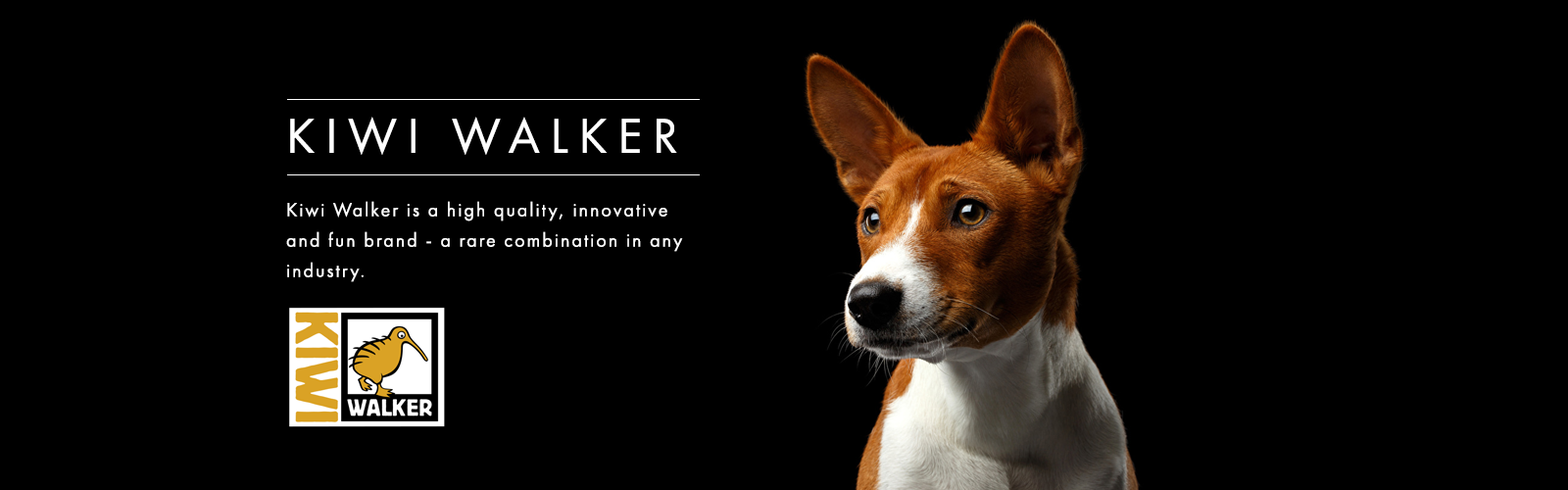
<style>
.page{position:relative;width:1568px;height:490px;background:#000000}
.page>*{position:absolute;margin:0}
.t1{font:51px "FuturaPT-Book";letter-spacing:0.2em;color:#ffffff}
.t2{font:19.6px/30.4px "FuturaPT-Book";letter-spacing:0.1em;color:#ffffff}
</style>
<div class="page">
<p class="t1" style="left:290px;top:117px;width:387px;height:38px">KIWI WALKER</p>
<p class="t2" style="left:286px;top:201px;width:397px;height:81px">Kiwi Walker is a high quality, innovative and fun brand - a rare combination in any industry.</p>
</div>
